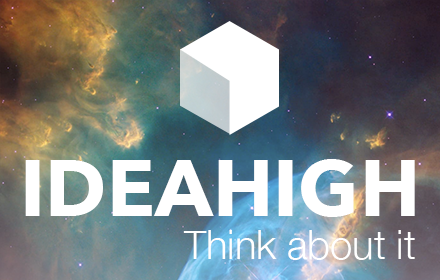
<style>
.page{position:relative;width:440px;height:280px}
.page>*{position:absolute;margin:0}
.t1{font:79.3px "AvenirNext-Bold";color:#ffffff}
.t2{font:39.7px "HelveticaNeue-Light";color:#ffffff}
</style>
<div class="page">
<p class="t1" style="left:25px;top:159px;width:390px;height:58px">IDEAHIGH</p>
<p class="t2" style="left:183px;top:230px;width:232px;height:30px">Think about it</p>
</div>
